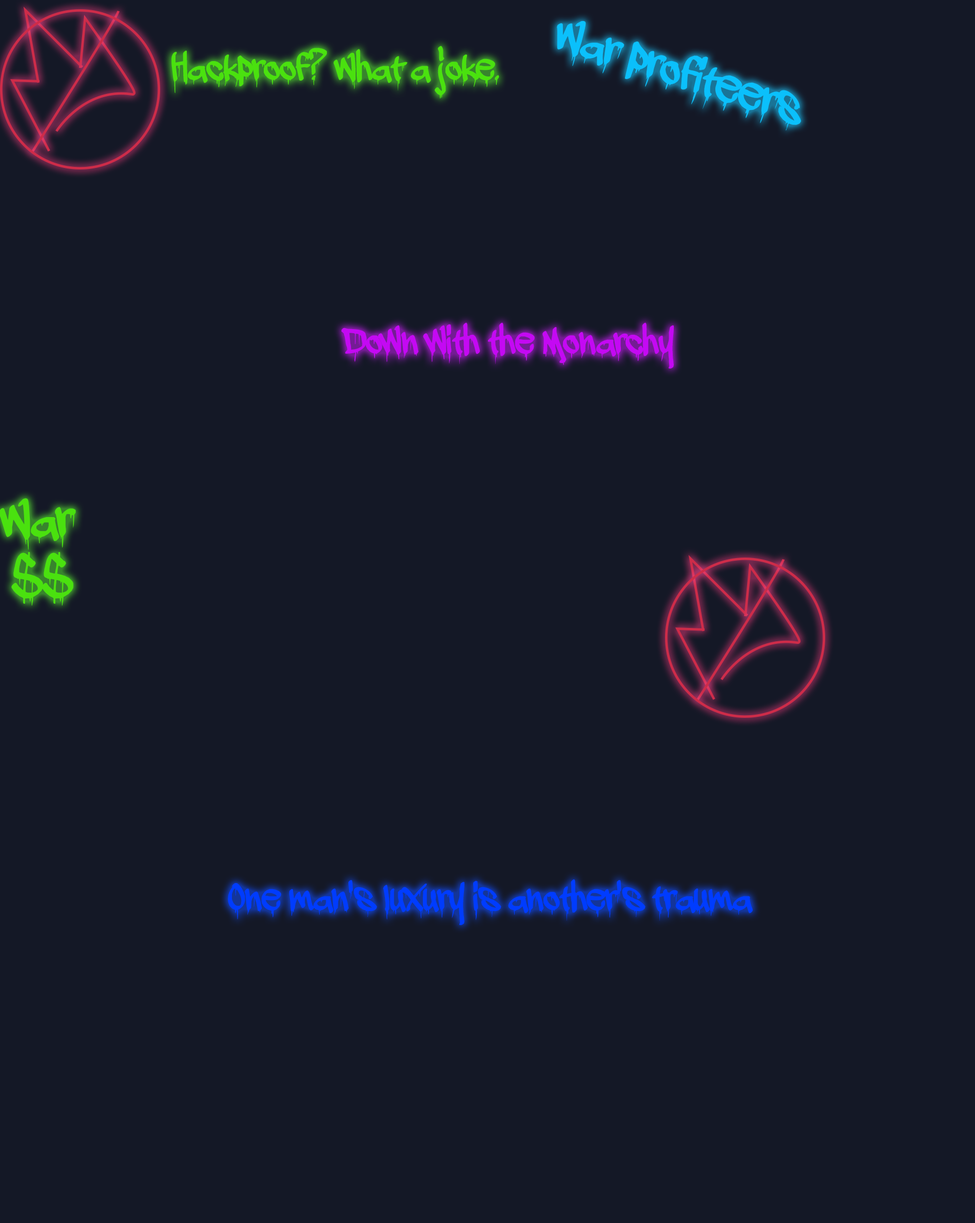
<style>
.page{position:relative;width:975px;height:1223px;background:#141826}
.page>*{position:absolute;margin:0}
.t1{font:58.2px "adrippingmarker";color:#0bc0fb}
.t2{font:45.7px "adrippingmarker";color:#4ae10f}
.t3{font:45.7px "adrippingmarker";color:#c409f3}
.t4{font:45.7px "adrippingmarker";color:#003cff}
</style>
<div class="page">
<p class="t1" style="left:557px;top:21px;width:244px;height:109px;rotate:18deg">War profiteers</p>
<p class="t2" style="left:171px;top:46px;width:328px;height:53px">Hackproof? What a joke.</p>
<p class="t3" style="left:341px;top:322px;width:333px;height:47px">Down with the Monarchy</p>
<p class="t4" style="left:228px;top:879px;width:525px;height:46px">One man's luxury is another's trauma</p>
</div>
